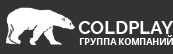
<style>
.page{position:relative;width:173px;height:54px;background:#333333}
.page>*{position:absolute;margin:0}
.t1{font:18px "Raleway-Bold";color:#ffffff}
.t2{font:9px "OpenSans-Bold";color:#ffffff}
</style>
<div class="page">
<p class="t1" style="left:78px;top:21px;width:96px;height:13px">COLDPLAY</p>
<p class="t2" style="left:79px;top:35px;width:94px;height:10px">ГРУППА КОМПАНИЙ</p>
</div>
